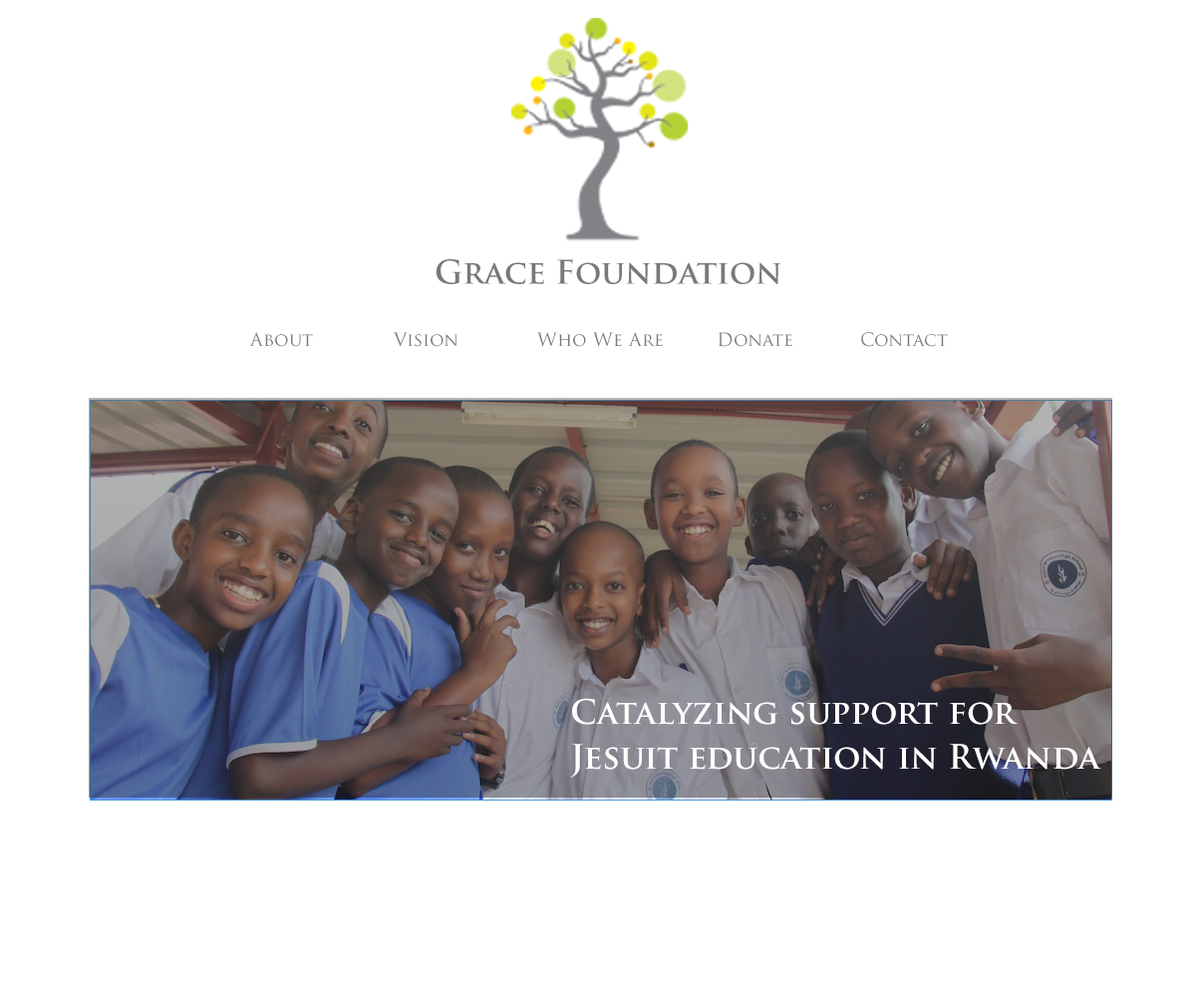
<style>
.page{position:relative;width:1196px;height:997px;background:#ffffff}
.page>*{position:absolute;margin:0}
.t1{font:31.9px "TrajanPro-Bold";color:#78797a}
.t2{font:17.9px "TrajanPro-Regular";color:#78797a}
.t3{font:32.9px/44.9px "TrajanPro-Bold";color:#ffffff}
</style>
<div class="page">
<p class="t1" style="left:436px;top:259px;width:346px;height:25px">Grace Foundation</p>
<p class="t2" style="left:249px;top:332px;width:699px;height:15px">About    Vision   Who We Are  Donate  Contact</p>
<p class="t3" style="left:570px;top:698px;width:532px;height:80px">Catalyzing support for Jesuit education in Rwanda</p>
</div>
